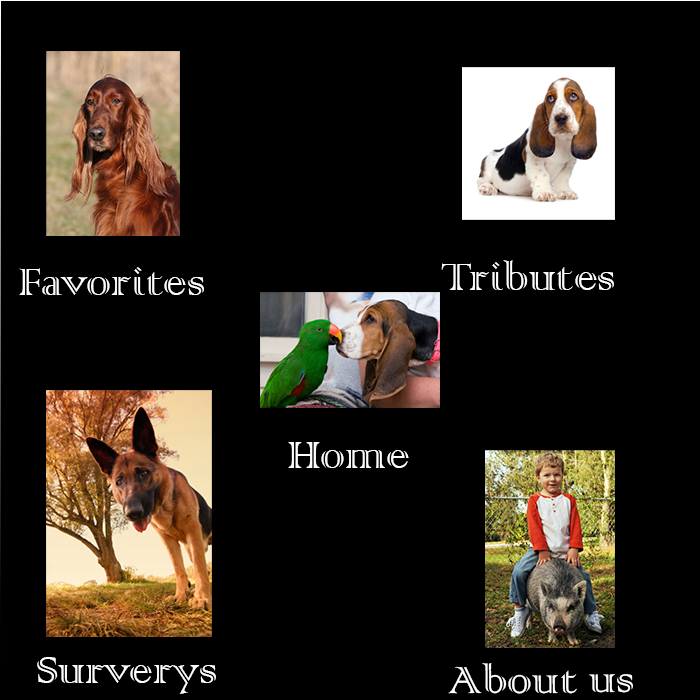
<style>
.page{position:relative;width:700px;height:700px;background:#000000}
.page>*{position:absolute;margin:0}
.t1{font:50px "ColonnaMT";color:#ffffff}
</style>
<div class="page">
<p class="t1" style="left:19px;top:267px;width:185px;height:28px">Favorites</p>
<p class="t1" style="left:441px;top:260px;width:173px;height:30px">Tributes</p>
<p class="t1" style="left:288px;top:442px;width:121px;height:26px">Home</p>
<p class="t1" style="left:37px;top:657px;width:179px;height:37px">Surverys</p>
<p class="t1" style="left:448px;top:663px;width:185px;height:31px">About us</p>
</div>
